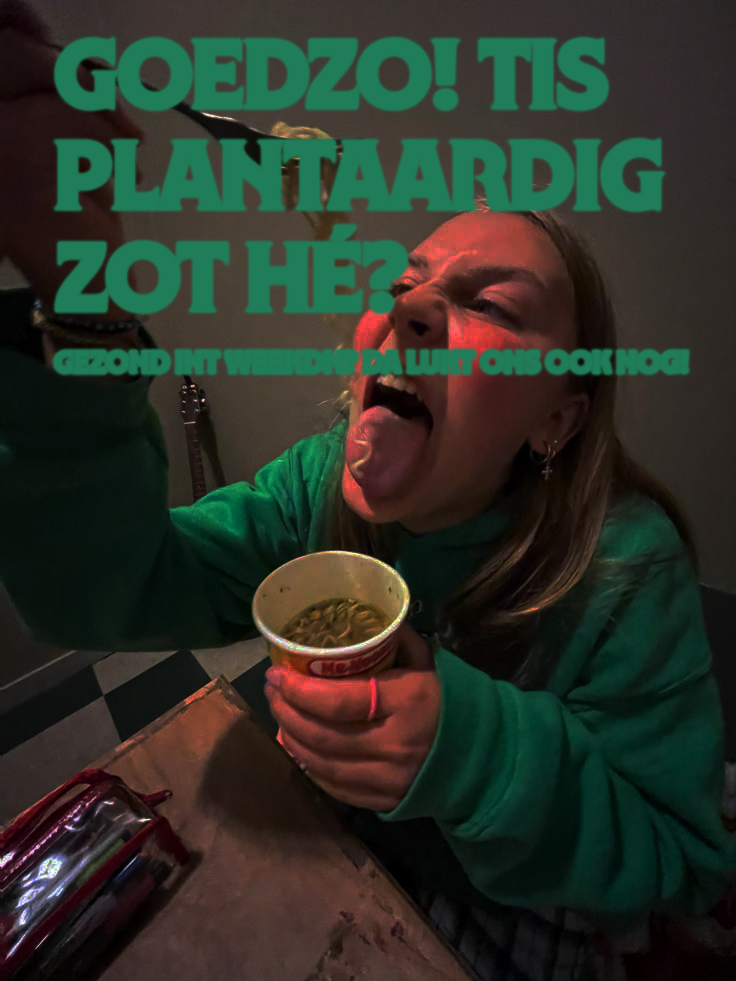
<style>
.page{position:relative;width:736px;height:981px}
.page>*{position:absolute;margin:0}
.t1{font:80px/101.1px "NYBotanicalGothic-Extrabold";letter-spacing:-0.02em;color:#1f7e59;scale:1.04 1}
.t2{font:25px "NYBotanicalGothic-Extrabold";letter-spacing:-0.02em;color:#1f7e59;scale:1.04 1}
</style>
<div class="page">
<p class="t1" style="left:54px;top:37px;width:611px;height:275px">GOEDZO! TIS<br>PLANTAARDIG<br>ZOT HÉ?</p>
<p class="t2" style="left:54px;top:350px;width:635px;height:23px">GEZOND INT WEEKDN? DA LUKT ONS OOK NOG!</p>
</div>
